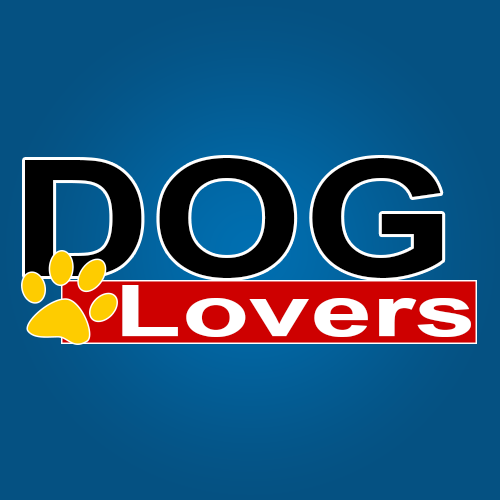
<style>
.page{position:relative;width:500px;height:500px;background:#055182}
.page>*{position:absolute;margin:0}
.t1{font:160.8px "Arial-BoldMT";color:#000000;scale:1.21 1}
.t2{font:71.2px "Arial-BoldMT";color:#ffffff;scale:1.55 1}
</style>
<div class="page">
<p class="t1" style="left:25px;top:158px;width:418px;height:120px">DOG</p>
<p class="t2" style="left:122px;top:285px;width:349px;height:52px">Lovers</p>
</div>
